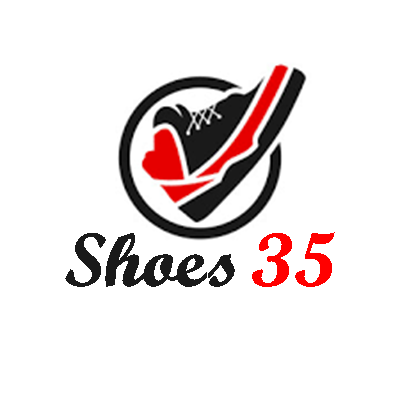
<style>
.page{position:relative;width:400px;height:400px;background:#ffffff}
.page>*{position:absolute;margin:0}
.t1{font:72.5px "Lao_Dok_MaLi-Medium";color:#1a1a1a}
.t2{font:72.5px "Lao_Dok_MaLi-Medium";color:#ff0000}
</style>
<div class="page">
<p class="t1" style="left:65px;top:232px;width:270px;height:55px">Shoes<span class="t2"> 35</span></p>
</div>
